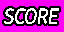
<style>
.page{position:relative;width:64px;height:32px;background:#ff00f6}
.page>*{position:absolute;margin:0}
.t1{font:22.3px "BreezeSans-Medium";letter-spacing:-0.05em;color:#ffffff;font-style:italic;scale:0.82 1}
</style>
<div class="page">
<p class="t1" style="left:4px;top:8px;width:55px;height:16px">SCORE</p>
</div>
